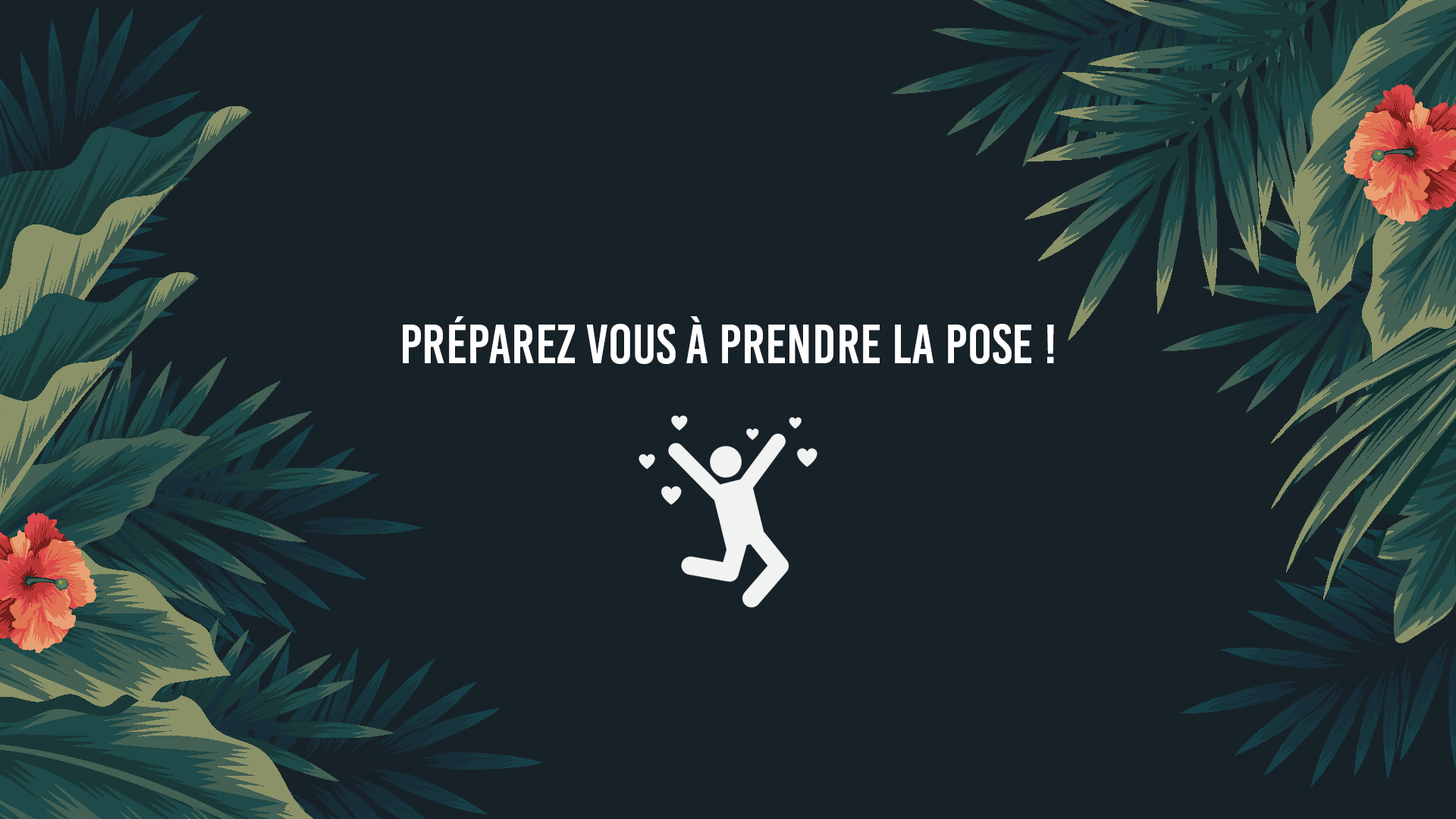
<style>
.page{position:relative;width:1456px;height:819px;background:#172228}
.page>*{position:absolute;margin:0}
.t1{font:55.6px "BebasKai";color:#ffffff}
</style>
<div class="page">
<p class="t1" style="left:403px;top:316px;width:651px;height:48px">Préparez vous à prendre la pose !</p>
</div>
